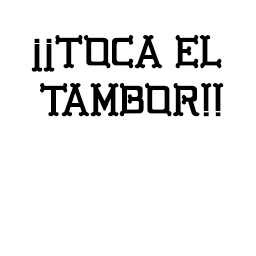
<style>
.page{position:relative;width:256px;height:256px;background:#ffffff}
.page>*{position:absolute;margin:0}
.t1{font:39.6px "GBGoldenBones-Regular";color:#000000}
.t2{font:40px "GBGoldenBones-Regular";color:#000000}
.t3{font:40px "MyriadPro-Regular";color:#000000}
</style>
<div class="page">
<p class="t1" style="left:31px;top:38px;width:24px;height:34px;rotate:180deg">!!</p>
<p class="t2" style="left:40px;top:35px;width:184px;height:82px;text-align:center"><span class="t3">   </span>TOCA EL <br>TAMBOR!!</p>
</div>
